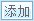
<style>
.page{position:relative;width:34px;height:21px;background:#d0f0ff}
.page>*{position:absolute;margin:0}
.t1{font:12px "SimSun";letter-spacing:0.38em;color:#666666}
</style>
<div class="page">
<p class="t1" style="left:5px;top:5px;width:24px;height:12px">添加</p>
</div>
